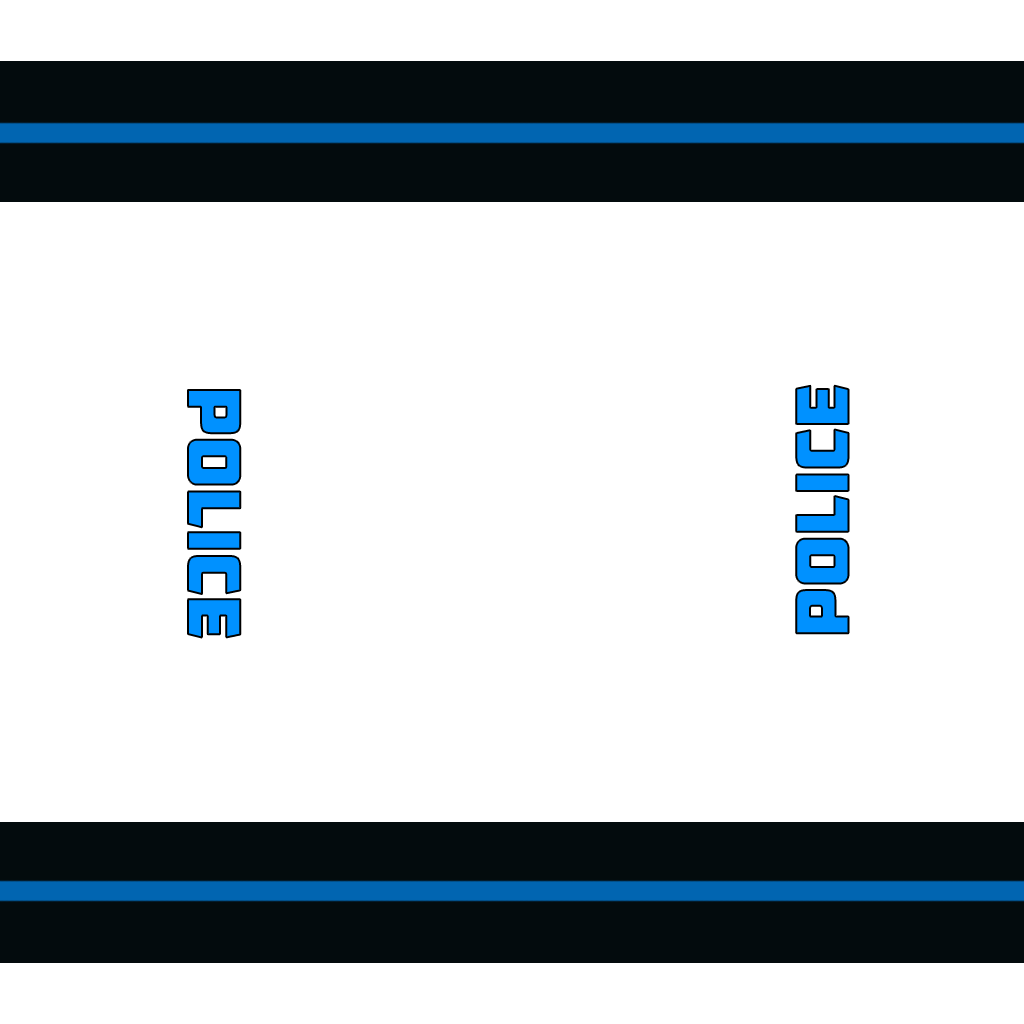
<style>
.page{position:relative;width:1024px;height:1024px;background:#ffffff}
.page>*{position:absolute;margin:0}
.t1{font:72px "AMCAPEternal";letter-spacing:-0.01em;color:#0091ff;text-transform:uppercase}
</style>
<div class="page">
<p class="t1" style="left:188px;top:390px;width:53px;height:248px;rotate:90deg">police</p>
<p class="t1" style="left:796px;top:385px;width:53px;height:249px;rotate:-90deg">police</p>
</div>
